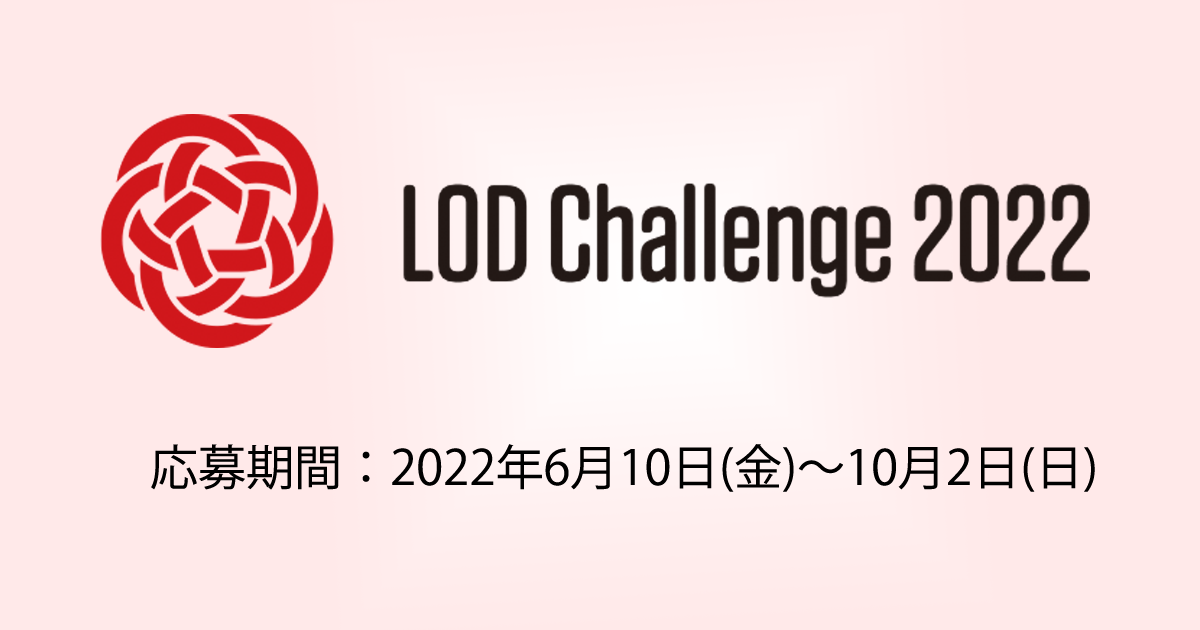
<style>
.page{position:relative;width:1200px;height:630px;background:#ffe9e9}
.page>*{position:absolute;margin:0}
.t1{font:48px "KozGoPro-Regular";color:#000000}
</style>
<div class="page">
<p class="t1" style="left:151px;top:444px;width:944px;height:48px">応募期間：2022年6月10日(金)～10月2日(日)</p>
</div>
